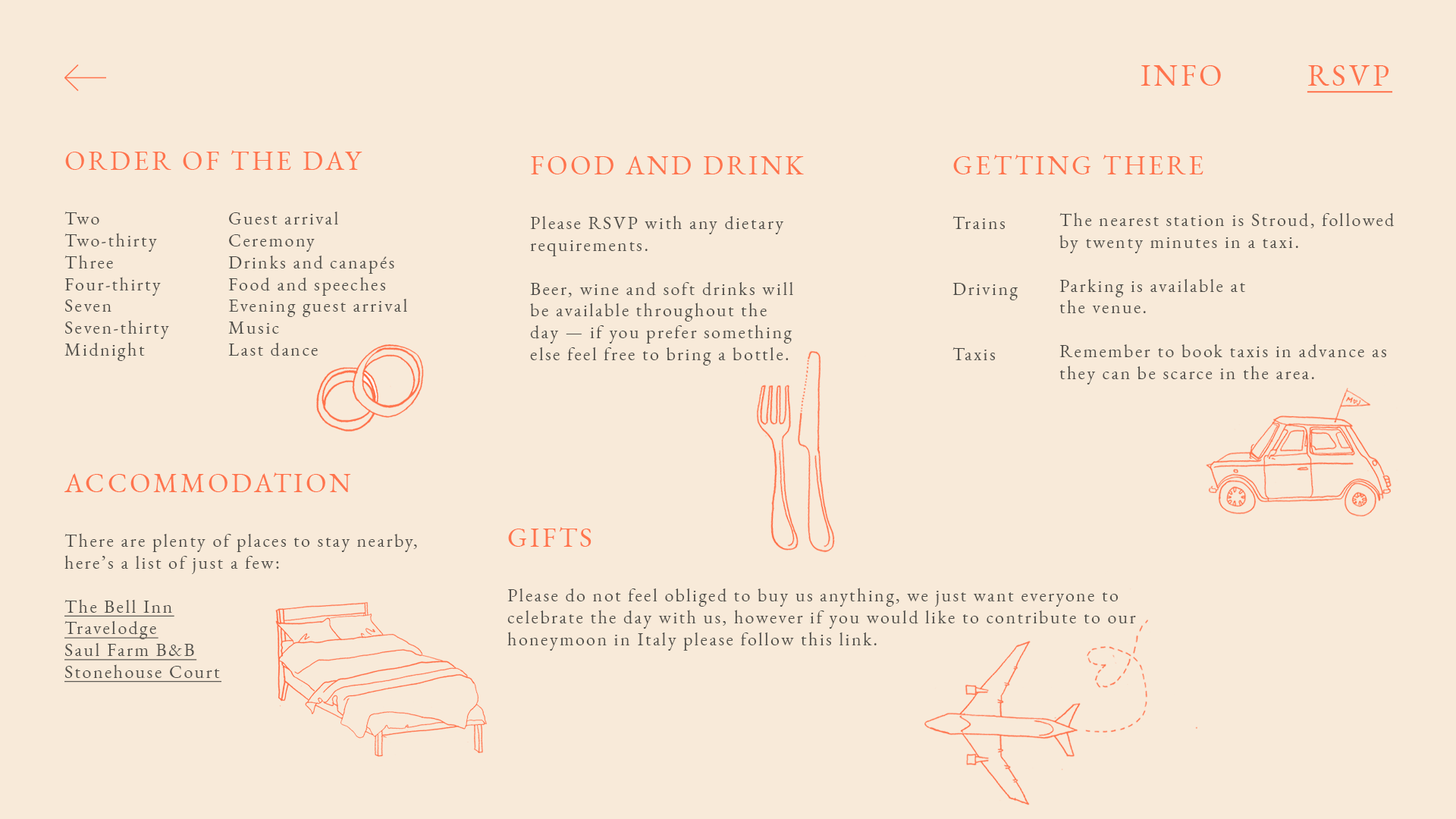
<style>
.page{position:relative;width:1456px;height:819px;background:#f8ead9}
.page>*{position:absolute;margin:0}
.t1{font:30.3px "EBGaramond-Regular";letter-spacing:0.1em;color:#ff744d}
.t2{font:30.3px "EBGaramond-Regular";letter-spacing:0.1em;color:#ff744d;text-decoration:underline}
.t3{font:18.2px "EBGaramond-Regular";letter-spacing:0.1em;color:#52504b}
.t4{font:27.3px "EBGaramond-Regular";letter-spacing:0.1em;color:#ff744d}
.t5{font:18.2px "EBGaramond-Regular";letter-spacing:0.1em;color:#52504b;text-decoration:underline}
</style>
<div class="page">
<p class="t1" style="left:1141px;top:65px;width:252px;height:28px">INFO         <span class="t2">RSVP</span></p>
<p class="t3" style="left:64px;top:150px;width:343px;height:211px"><span class="t4">ORDER OF THE DAY<br><br></span>Two       Guest arrival<br>Two-thirty   Ceremony  <br>Three     Drinks and canapés   <br>Four-thirty    Food and speeches <br>Seven      Evening guest arrival<br>Seven-thirty   Music <br>Midnight    Last dance</p>
<p class="t3" style="left:530px;top:155px;width:274px;height:211px"><span class="t4">FOOD AND DRINK<br><br></span>Please RSVP with any dietary<br>requirements.<br><br>Beer, wine and soft drinks will <br>be available throughout the <br>day — if you prefer something <br>else feel free to bring a bottle.</p>
<p class="t3" style="left:952px;top:155px;width:251px;height:205px"><span class="t4">GETTING THERE<br><br></span>Trains<br><br><br>Driving   <br><br><br>Taxis</p>
<p class="t3" style="left:1059px;top:212px;width:336px;height:172px"><span class="t4"><br><br></span>The nearest station is Stroud, followed <br>by twenty minutes in a taxi.<br><br>Parking is available at <br>the venue.<br><br>Remember to book taxis in advance as they can be scarce in the area.</p>
<p class="t3" style="left:64px;top:472px;width:353px;height:210px"><span class="t4">ACCOMMODATION<br><br></span>There are plenty of places to stay nearby, here’s a list of just a few:<br><br><span class="t5">The Bell Inn<br>Travelodge<br>Saul Farm B&amp;B<br>Stonehouse Court</span></p>
<p class="t3" style="left:507px;top:527px;width:629px;height:124px"><span class="t4">GIFTS<br><br></span>Please do not feel obliged to buy us anything, we just want everyone to celebrate the day with us, however if you would like to contribute to our honeymoon in Italy please follow this link.</p>
</div>
